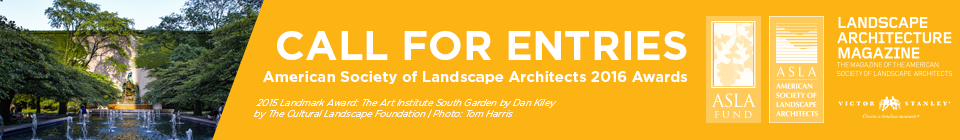
<style>
.page{position:relative;width:960px;height:140px;background:#fcb415}
.page>*{position:absolute;margin:0}
.t1{font:15px/22px "Gotham-Bold";color:#ffffff}
.t2{font:41px/22px "Gotham-Bold";color:#ffffff}
.t3{font:9.3px/0px "Gotham-Light";color:#ffffff;font-style:italic;scale:0.96 1}
</style>
<div class="page">
<p class="t1" style="left:263px;top:31px;width:424px;height:53px;text-align:right"><span class="t2">CALL FOR ENTRIES<br></span>American Society of Landscape Architects 2016 Awards</p>
<p class="t3" style="left:253px;top:99px;width:304px;height:20px">2015 Landmark Award: The Art Institute South Garden by Dan Kiley<br>by The Cultural Landscape Foundation | Photo: Tom Harris</p>
</div>
